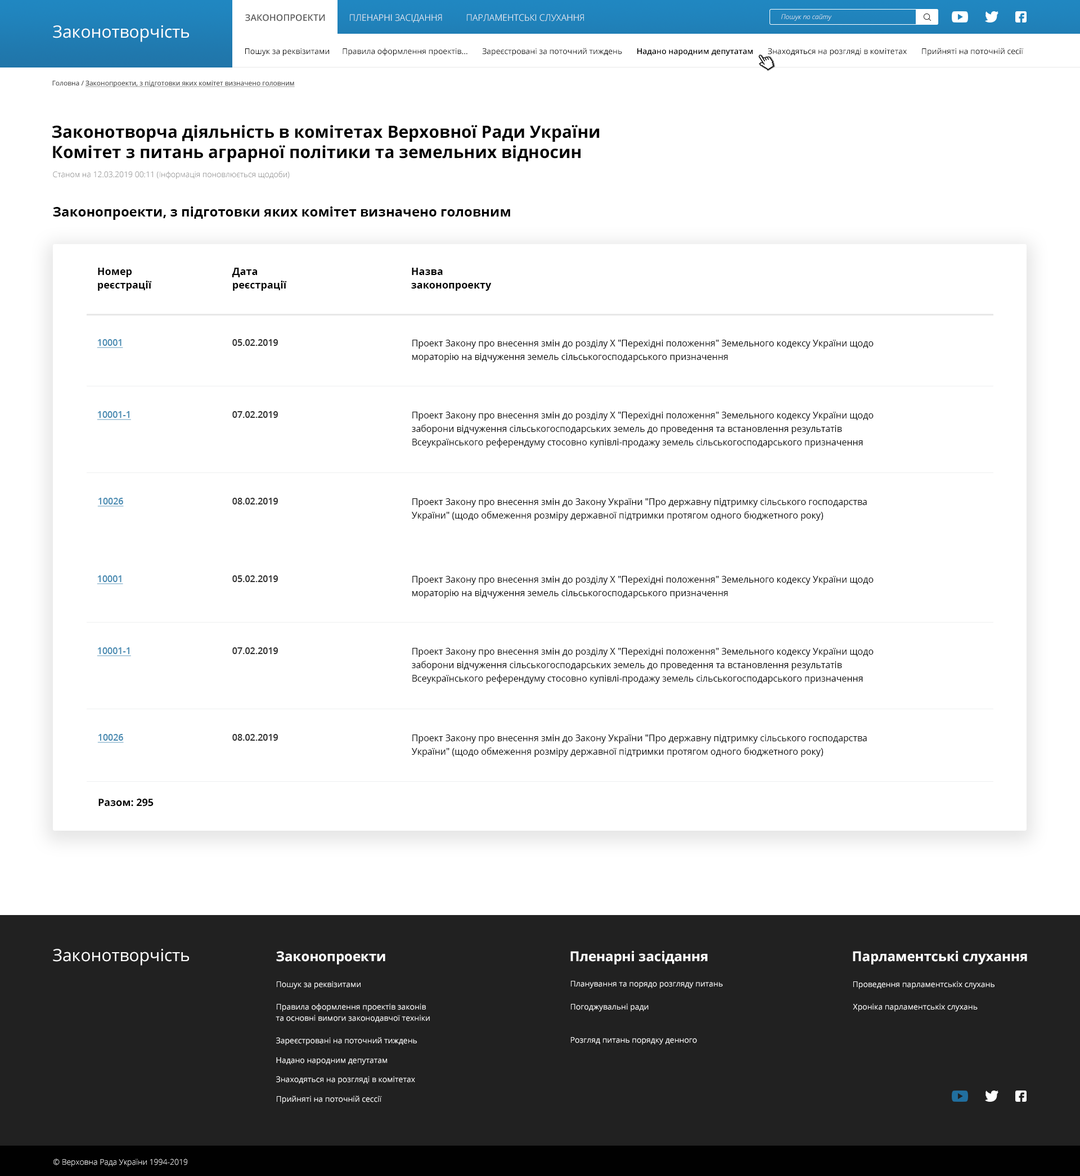
<style>
.page{position:relative;width:1080px;height:1176px;background:#ffffff}
.page>*{position:absolute;margin:0}
.t1{font:9px "OpenSans-SemiBold";color:#585858;text-transform:uppercase}
.t2{font:9px "OpenSans-Light";color:#ffffff;text-transform:uppercase}
.t3{font:6.8px "OpenSans-LightItalic";color:#ffffff}
.t4{font:16.9px "OpenSans-Regular";color:#ffffff}
.t5{font:7.9px "OpenSans-Regular";color:#000000}
.t6{font:7.9px "OpenSans-SemiBold";color:#000000}
.t7{font:6.8px "OpenSans";color:#333333;text-decoration:underline}
.t8{font:6.8px "OpenSans";color:#333333}
.t9{font:16.9px "OpenSans-Bold";color:#000000}
.t10{font:7.9px "OpenSans-Light";color:#737373}
.t11{font:13.5px "OpenSans-Bold";color:#000000}
.t12{font:10.1px/13.5px "OpenSans-Bold";color:#000000}
.t13{font:9px "OpenSans-Semibold";color:#4d8cb2;text-decoration:underline}
.t14{font:9px "OpenSans-Semibold";color:#333333}
.t15{font:9px/13.5px "OpenSans-Regular";color:#000000}
.t16{font:10.1px "OpenSans-Bold";color:#000000}
.t17{font:13.5px "OpenSans-Bold";color:#ffffff}
.t18{font:7.9px "OpenSans-Regular";color:#ffffff}
.t19{font:7.9px/11.3px "OpenSans-Regular";color:#ffffff}
.t20{font:7.9px/14.6px "OpenSans-Regular";color:#ffffff}
.t21{font:7.9px "OpenSans-Light";color:#ffffff}
</style>
<div class="page">
<p class="t1" style="left:245px;top:14px;width:80px;height:7px">Законопроекти</p>
<p class="t2" style="left:350px;top:14px;width:92px;height:9px">пленарні засідання</p>
<p class="t2" style="left:467px;top:14px;width:117px;height:7px">парламентські слухання</p>
<p class="t3" style="left:781px;top:14px;width:51px;height:7px">Пошук по сайту</p>
<p class="t4" style="left:53px;top:25px;width:136px;height:17px">Законотворчість</p>
<p class="t5" style="left:245px;top:48px;width:778px;height:8px">Пошук за реквізитами      Правила оформлення проектів...       Зареєстровані за поточний тиждень       <span class="t6">Надано народним депутатам</span>       Знаходяться на розгляді в комітетах       Прийняті на поточній сесії</p>
<p class="t7" style="left:52px;top:80px;width:243px;height:7px"><span class="t8">Головна / </span>Законопроекти, з підготовки яких комітет визначено головним</p>
<p class="t9" style="left:52px;top:125px;width:548px;height:38px">Законотворча діяльність в комітетах Верховної Ради України<br>Комітет з питань аграрної політики та земельних відносин</p>
<p class="t10" style="left:53px;top:171px;width:237px;height:8px">Станом на 12.03.2019 00:11 (Інформація поновлюється щодоби)</p>
<p class="t11" style="left:53px;top:206px;width:457px;height:14px">Законопроекти, з підготовки яких комітет визначено головним</p>
<p class="t12" style="left:98px;top:268px;width:54px;height:23px">Номер<br>реєстрацiї</p>
<p class="t12" style="left:232px;top:268px;width:55px;height:23px">Дата<br>реєстрації</p>
<p class="t12" style="left:411px;top:268px;width:81px;height:23px">Назва<br>законопроекту</p>
<p class="t13" style="left:97px;top:339px;width:26px;height:9px">10001</p>
<p class="t14" style="left:232px;top:339px;width:46px;height:7px">05.02.2019</p>
<p class="t15" style="left:412px;top:340px;width:462px;height:22px">Проект Закону про внесення змін до розділу Х "Перехідні положення" Земельного кодексу України щодо мораторію на відчуження земель сільськогосподарського призначення</p>
<p class="t13" style="left:97px;top:411px;width:34px;height:9px">10001-1</p>
<p class="t14" style="left:232px;top:411px;width:46px;height:7px">07.02.2019</p>
<p class="t15" style="left:412px;top:412px;width:462px;height:36px">Проект Закону про внесення змін до розділу Х "Перехідні положення" Земельного кодексу України щодо заборони відчуження сільськогосподарських земель до проведення та встановлення результатів Всеукраїнського референдуму стосовно купівлі-продажу земель сільськогосподарського призначення</p>
<p class="t13" style="left:97px;top:498px;width:27px;height:9px">10026</p>
<p class="t14" style="left:232px;top:498px;width:46px;height:7px">08.02.2019</p>
<p class="t15" style="left:412px;top:498px;width:455px;height:23px">Проект Закону про внесення змін до Закону України "Про державну підтримку сільського господарства України" (щодо обмеження розміру державної підтримки протягом одного бюджетного року)</p>
<p class="t13" style="left:97px;top:575px;width:26px;height:9px">10001</p>
<p class="t14" style="left:232px;top:575px;width:46px;height:7px">05.02.2019</p>
<p class="t15" style="left:412px;top:576px;width:462px;height:23px">Проект Закону про внесення змін до розділу Х "Перехідні положення" Земельного кодексу України щодо мораторію на відчуження земель сільськогосподарського призначення</p>
<p class="t13" style="left:97px;top:647px;width:34px;height:9px">10001-1</p>
<p class="t14" style="left:232px;top:647px;width:46px;height:7px">07.02.2019</p>
<p class="t15" style="left:412px;top:648px;width:462px;height:36px">Проект Закону про внесення змін до розділу Х "Перехідні положення" Земельного кодексу України щодо заборони відчуження сільськогосподарських земель до проведення та встановлення результатів Всеукраїнського референдуму стосовно купівлі-продажу земель сільськогосподарського призначення</p>
<p class="t13" style="left:97px;top:734px;width:27px;height:9px">10026</p>
<p class="t14" style="left:232px;top:734px;width:46px;height:7px">08.02.2019</p>
<p class="t15" style="left:412px;top:735px;width:455px;height:22px">Проект Закону про внесення змін до Закону України "Про державну підтримку сільського господарства України" (щодо обмеження розміру державної підтримки протягом одного бюджетного року)</p>
<p class="t16" style="left:98px;top:799px;width:56px;height:8px">Разом: 295</p>
<p class="t4" style="left:53px;top:949px;width:136px;height:17px">Законотворчість</p>
<p class="t17" style="left:276px;top:951px;width:109px;height:14px">Законопроекти</p>
<p class="t17" style="left:570px;top:951px;width:138px;height:14px">Пленарні засідання</p>
<p class="t17" style="left:853px;top:951px;width:174px;height:14px">Парламентські слухання</p>
<p class="t18" style="left:277px;top:981px;width:84px;height:8px">Пошук за реквізитами</p>
<p class="t18" style="left:571px;top:981px;width:152px;height:8px">Планування та порядо розгляду питань</p>
<p class="t18" style="left:853px;top:981px;width:142px;height:8px">Проведення парламентськіх слухань</p>
<p class="t19" style="left:276px;top:1004px;width:154px;height:19px"><span class="t20">Правила оформлення проектів законів<br></span>та основні вимоги законодавчої техніки</p>
<p class="t18" style="left:571px;top:1004px;width:78px;height:8px">Погоджувальні ради</p>
<p class="t18" style="left:853px;top:1004px;width:125px;height:8px">Хроніка парламентськіх слухань</p>
<p class="t18" style="left:276px;top:1037px;width:141px;height:9px">Зареєстровані на поточний тиждень</p>
<p class="t18" style="left:571px;top:1037px;width:126px;height:8px">Розгляд питань порядку денного</p>
<p class="t18" style="left:276px;top:1058px;width:111px;height:7px">Надано народним депутатам</p>
<p class="t18" style="left:276px;top:1076px;width:139px;height:9px">Знаходяться на розгляді в комітетах</p>
<p class="t18" style="left:277px;top:1096px;width:105px;height:8px">Прийняті на поточній сессії</p>
<p class="t21" style="left:53px;top:1159px;width:134px;height:8px">© Верховна Рада України 1994-2019</p>
</div>
